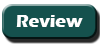
<style>
.page{position:relative;width:100px;height:45px;background:#15514d}
.page>*{position:absolute;margin:0}
.t1{font:18px "ErasITC-Bold";color:#ffffff}
</style>
<div class="page">
<p class="t1" style="left:16px;top:15px;width:67px;height:12px">Review</p>
</div>
